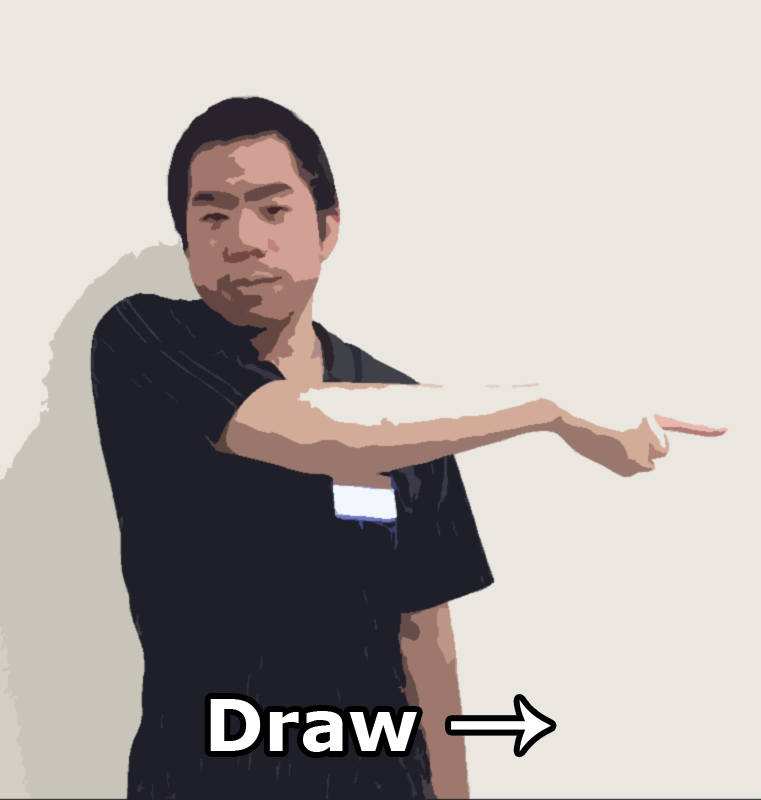
<style>
.page{position:relative;width:761px;height:800px;background:#e9e7e0}
.page>*{position:absolute;margin:0}
.t1{font:72px "Verdana-Bold";color:#ffffff}
</style>
<div class="page">
<p class="t1" style="left:210px;top:699px;width:207px;height:53px">Draw</p>
</div>
